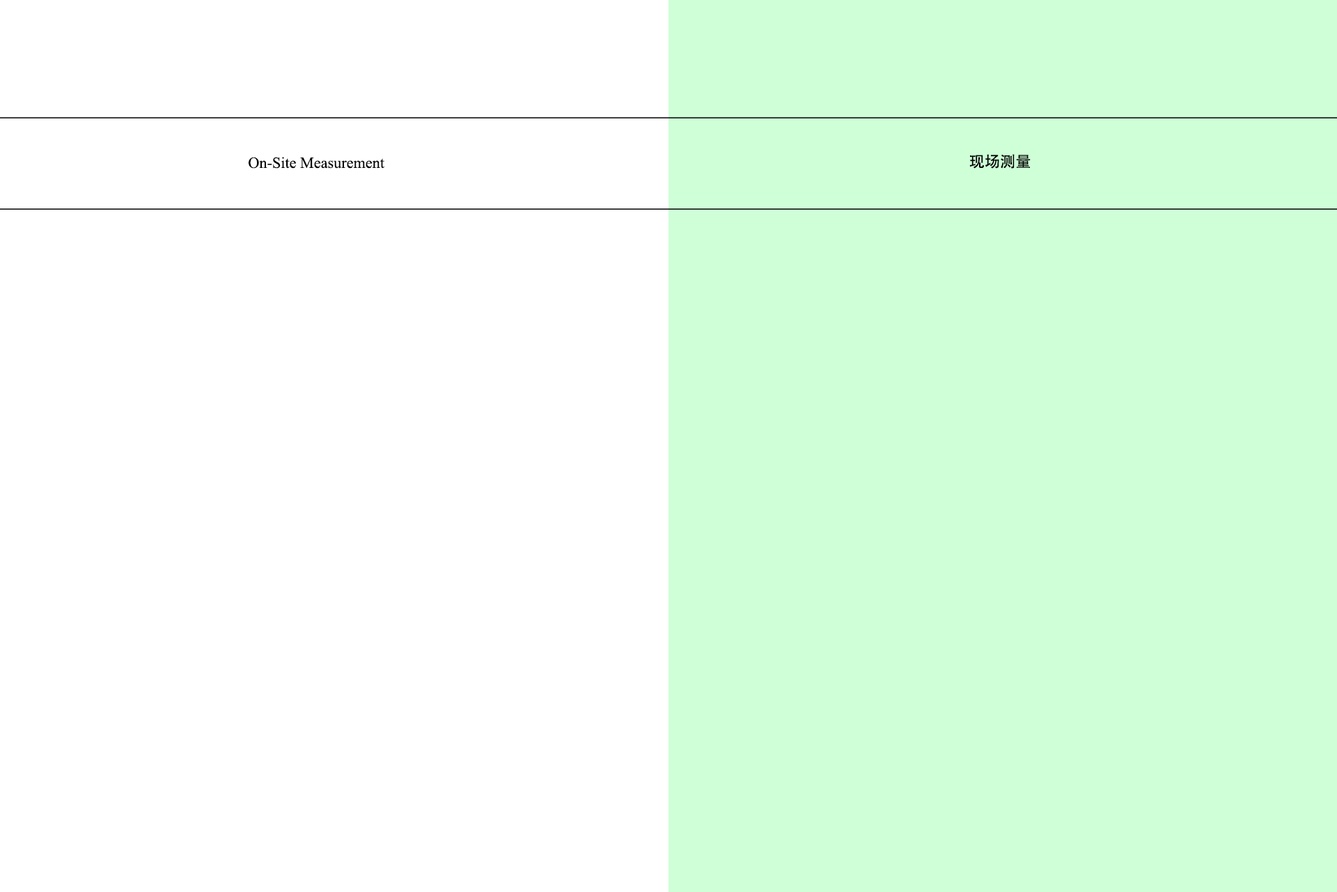
<style>
.page{position:relative;width:1337px;height:892px;background:#ceffd7}
.page>*{position:absolute;margin:0}
.t1{font:15.5px "TimesNewRomanPSMT";color:#000000}
.t2{font:15.5px "AdobeHeitiStd-Regular";color:#000000}
</style>
<div class="page">
<p class="t1" style="left:249px;top:157px;width:136px;height:12px">On-Site Measurement</p>
<p class="t2" style="left:970px;top:154px;width:61px;height:15px">现场测量</p>
</div>
